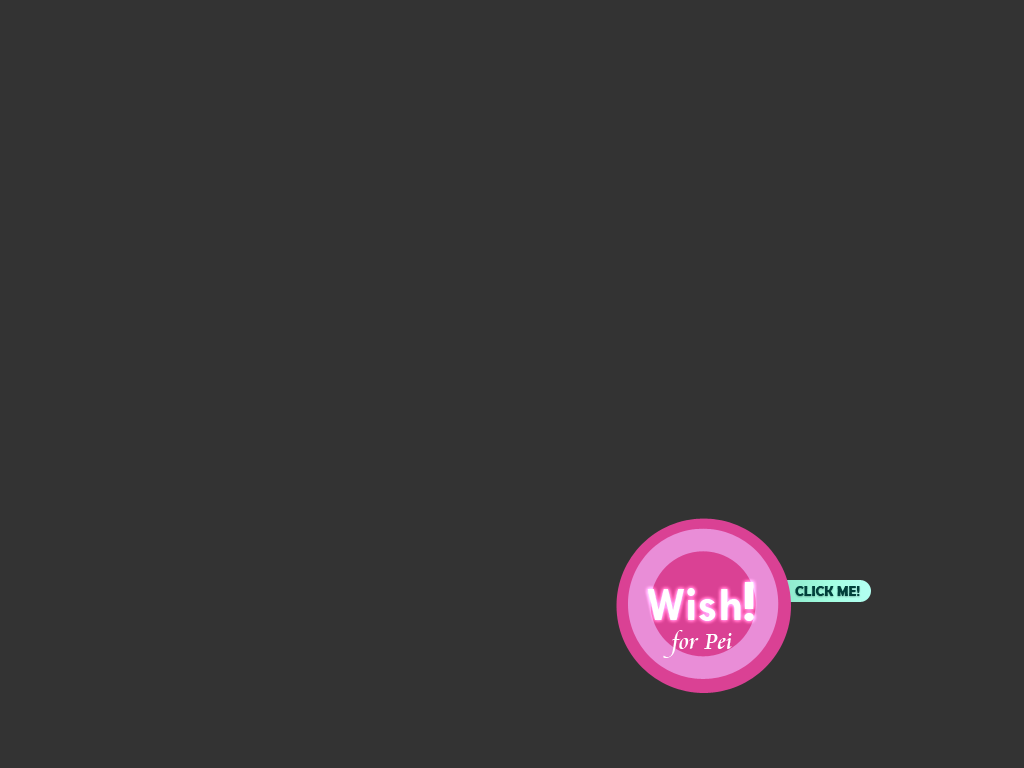
<style>
.page{position:relative;width:1024px;height:768px;background:#333333}
.page>*{position:absolute;margin:0}
.t1{font:48px "TwCenMT-Bold";color:#ffffff}
.t2{font:60px "TwCenMT-Bold";color:#ffffff}
.t3{font:14px "BerlinSansFBDemi-Bold";color:#00403b}
.t4{font:24px "CataneoBT-Regular";color:#ffffff}
</style>
<div class="page">
<p class="t1" style="left:647px;top:582px;width:107px;height:39px">Wish<span class="t2">!</span></p>
<p class="t3" style="left:795px;top:586px;width:65px;height:10px">CLICK ME!</p>
<p class="t4" style="left:663px;top:630px;width:69px;height:28px">for Pei</p>
</div>
